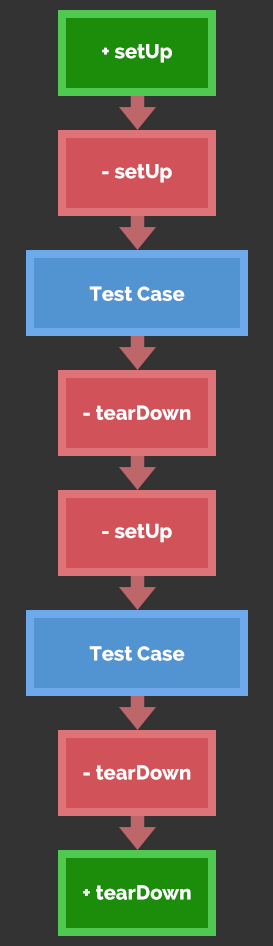
<style>
.page{position:relative;width:273px;height:946px;background:#333333}
.page>*{position:absolute;margin:0}
.t1{font:20.1px "Raleway-ExtraBold";color:#ffffff}
</style>
<div class="page">
<p class="t1" style="left:102px;top:44px;width:70px;height:19px">+ setUp</p>
<p class="t1" style="left:102px;top:164px;width:70px;height:19px">- setUp</p>
<p class="t1" style="left:89px;top:286px;width:96px;height:15px">Test Case</p>
<p class="t1" style="left:83px;top:405px;width:108px;height:15px">- tearDown</p>
<p class="t1" style="left:102px;top:523px;width:70px;height:20px">- setUp</p>
<p class="t1" style="left:89px;top:646px;width:96px;height:15px">Test Case</p>
<p class="t1" style="left:83px;top:765px;width:108px;height:15px">- tearDown</p>
<p class="t1" style="left:83px;top:885px;width:108px;height:15px">+ tearDown</p>
</div>
